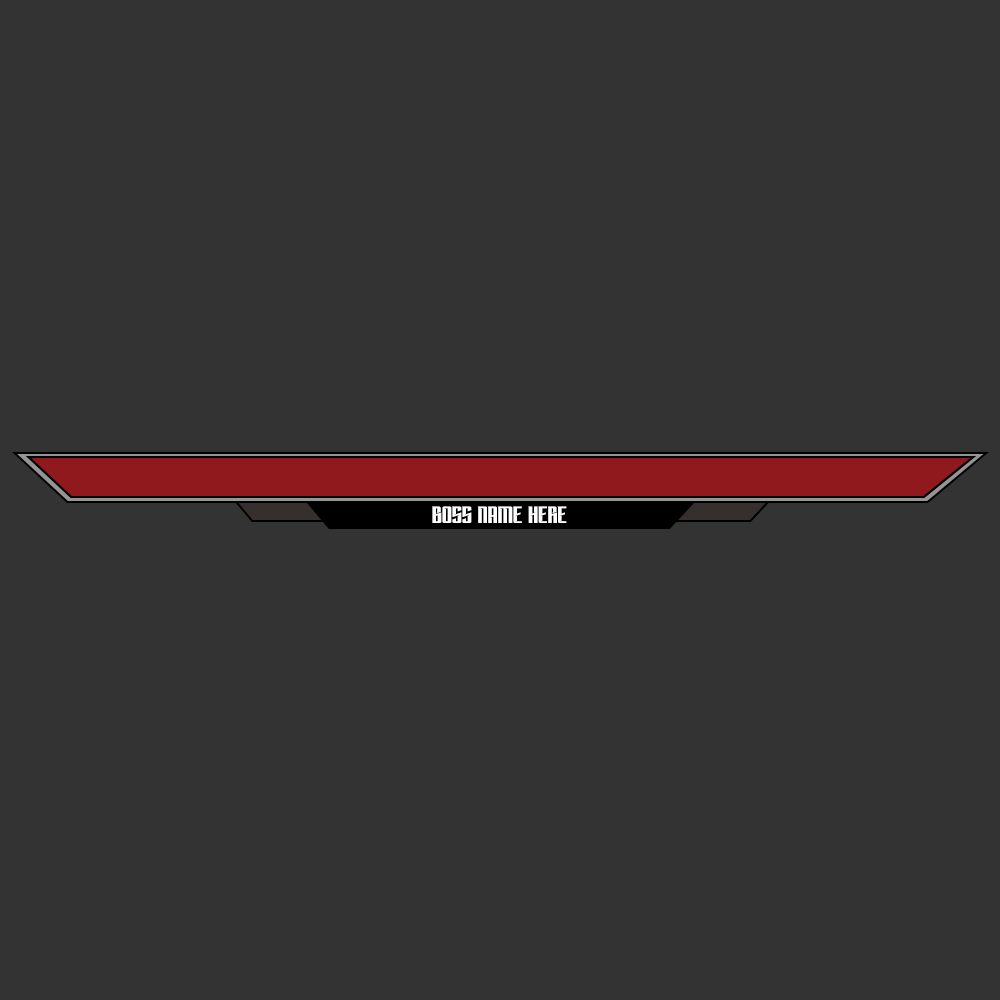
<style>
.page{position:relative;width:1000px;height:1000px;background:#333333}
.page>*{position:absolute;margin:0}
.t1{font:24px "Subspace";color:#ffffff}
</style>
<div class="page">
<p class="t1" style="left:432px;top:506px;width:135px;height:17px">BOSS NAME HERE</p>
</div>
